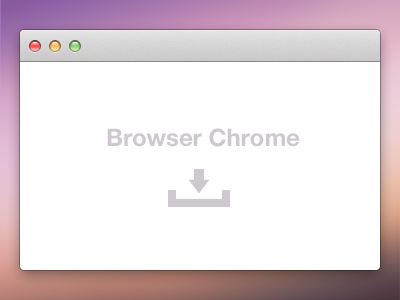
<style>
.page{position:relative;width:400px;height:300px;background:#ffffff}
.page>*{position:absolute;margin:0}
.t1{font:24px "HelveticaNeue-Bold";color:#cdc9cf}
</style>
<div class="page">
<p class="t1" style="left:107px;top:128px;width:193px;height:19px">Browser Chrome</p>
</div>
